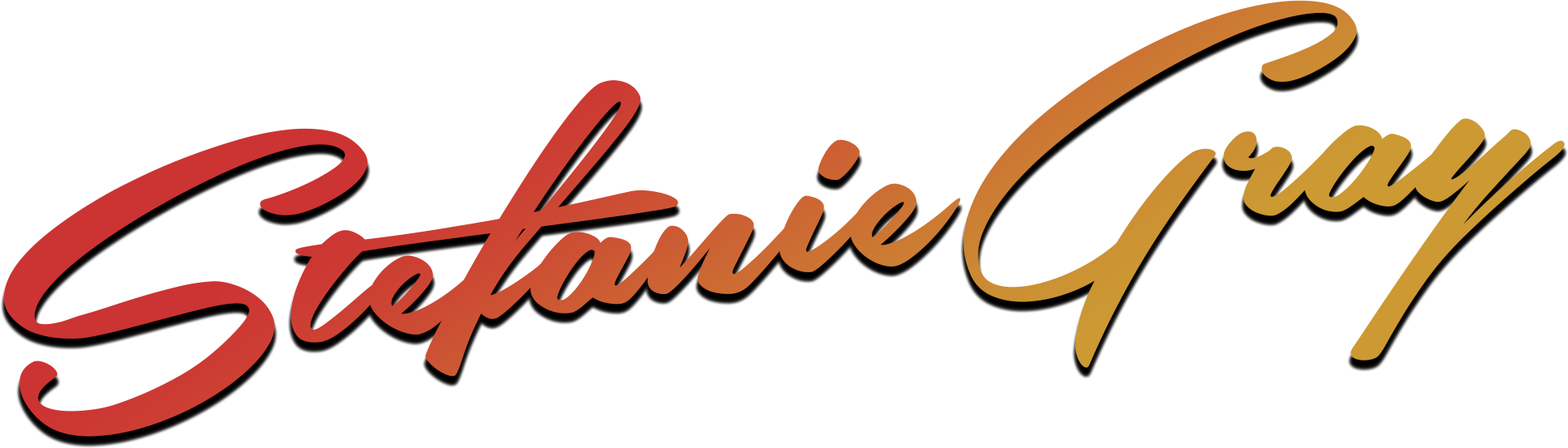
<style>
.page{position:relative;width:1568px;height:448px;background:#ffffff}
.page>*{position:absolute;margin:0}
.t1{font:404.7px "SouthernAirePersonalUseOnly"}
</style>
<div class="page">
<p class="t1" style="left:3px;top:0px;width:1562px;height:436px">StefanieGray</p>
</div>
